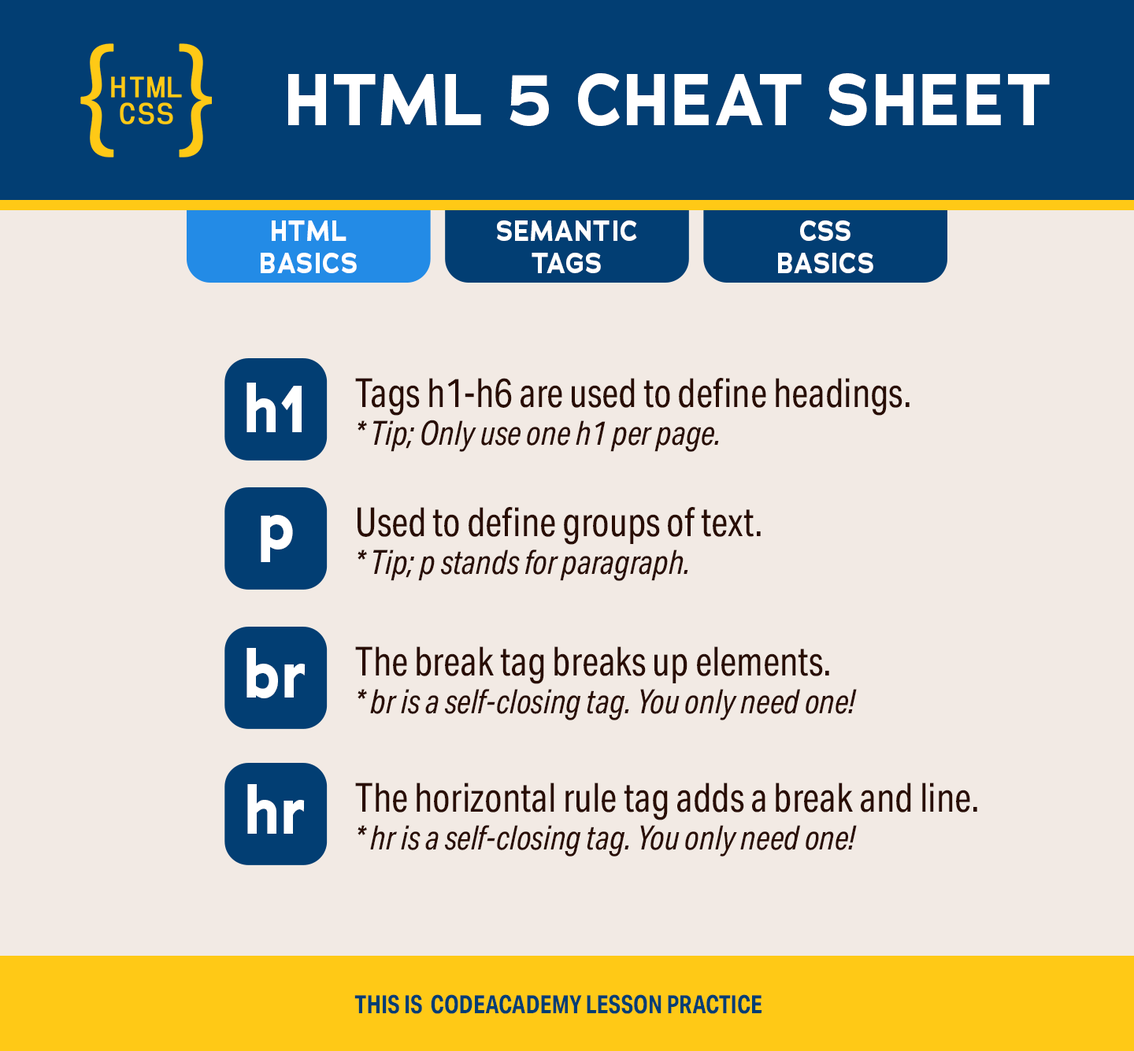
<style>
.page{position:relative;width:1134px;height:1051px;background:#f2eae4}
.page>*{position:absolute;margin:0}
.t1{font:72.6px "Adrianna-Bold";letter-spacing:0.01em;color:#ffffff;text-transform:uppercase;scale:0.93 1}
.t2{font:28.7px "Adrianna-Bold";letter-spacing:0.01em;color:#ffffff;text-transform:uppercase;scale:0.91 1}
.t3{font:67.3px "Adrianna-Bold";letter-spacing:0.01em;color:#ffffff;scale:0.93 1}
.t4{font:40.4px "AktivGroteskCd-Regular";color:#290d03;scale:0.93 1}
.t5{font:33.7px "AktivGroteskCd-Italic";color:#290d03;scale:0.93 1}
.t6{font:25.3px "AktivGroteskCd-Bold";color:#023e73;text-transform:uppercase;scale:0.93 1}
</style>
<div class="page">
<p class="t1" style="left:288px;top:73px;width:762px;height:53px">HTML 5 Cheat Sheet</p>
<p class="t2" style="left:261px;top:221px;width:96px;height:52px;text-align:center">html<br>Basics</p>
<p class="t2" style="left:497px;top:221px;width:140px;height:52px;text-align:center">Semantic<br>tags</p>
<p class="t2" style="left:778px;top:221px;width:95px;height:52px;text-align:center">CSS<br>basics</p>
<p class="t3" style="left:247px;top:383px;width:55px;height:49px">h1</p>
<p class="t4" style="left:355px;top:378px;width:555px;height:74px">Tags h1-h6 are used to define headings.<br><span class="t5">* Tip; Only use one h1 per page.</span></p>
<p class="t4" style="left:358px;top:507px;width:403px;height:74px">Used to define groups of text.<br><span class="t5">* Tip; p stands for paragraph.</span></p>
<p class="t3" style="left:261px;top:515px;width:32px;height:47px">p</p>
<p class="t3" style="left:247px;top:648px;width:59px;height:51px">br</p>
<p class="t5" style="left:355px;top:647px;width:502px;height:74px"><span class="t4">The break tag breaks up elements.<br></span>* br is a self-closing tag. You only need one!</p>
<p class="t3" style="left:247px;top:784px;width:58px;height:50px">hr</p>
<p class="t4" style="left:355px;top:783px;width:622px;height:74px">The horizontal rule tag adds a break and line.<br><span class="t5">* hr is a self-closing tag. You only need one!</span></p>
<p class="t6" style="left:354px;top:995px;width:408px;height:19px">This is  codeAcademy Lesson practice</p>
</div>
